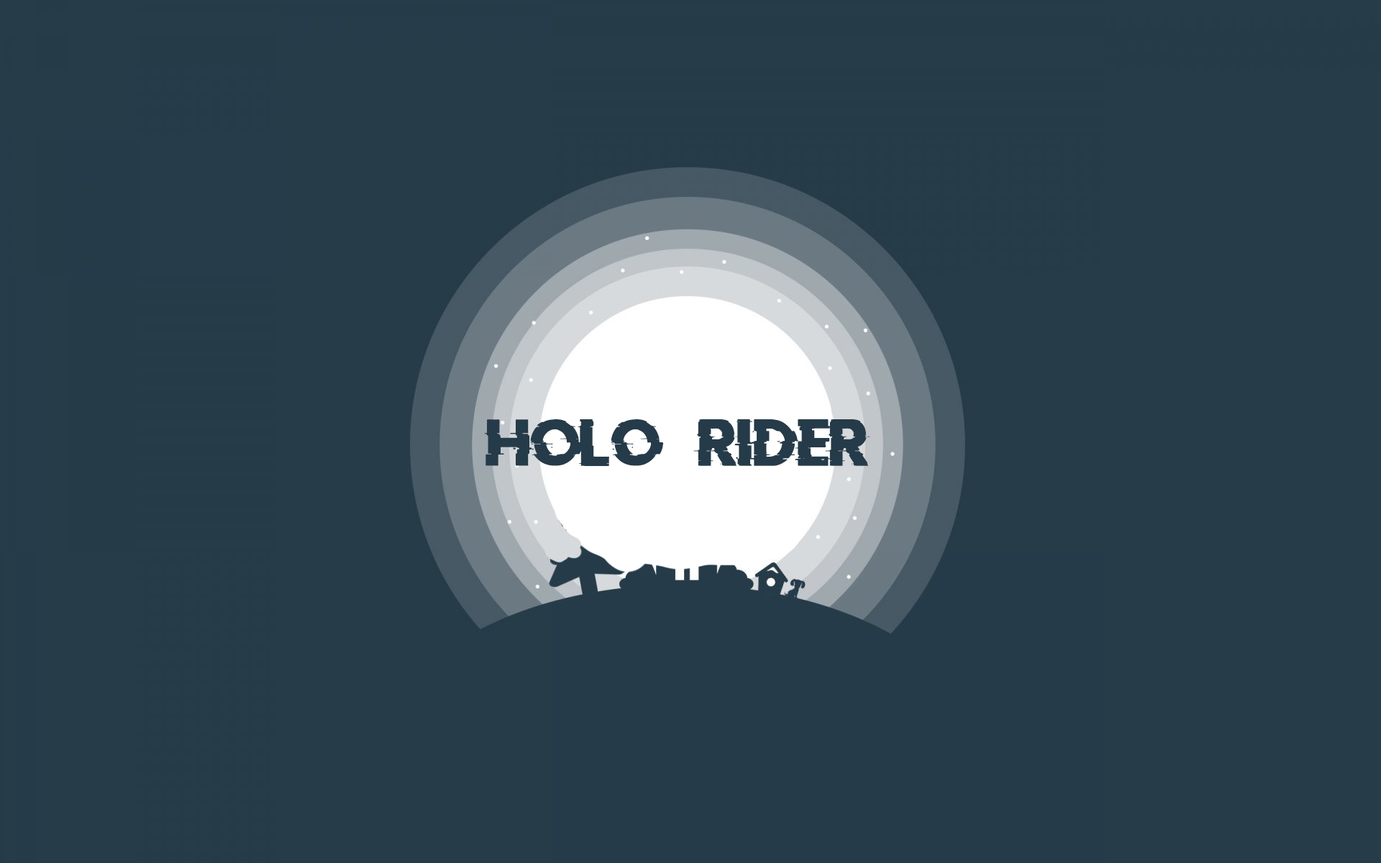
<style>
.page{position:relative;width:1381px;height:863px;background:#263c49}
.page>*{position:absolute;margin:0}
.t1{font:51.8px "DoctorGlitch";color:#253b49}
</style>
<div class="page">
<p class="t1" style="left:484px;top:419px;width:179px;height:47px">Holo</p>
<p class="t1" style="left:694px;top:419px;width:176px;height:47px">RIDER</p>
</div>
